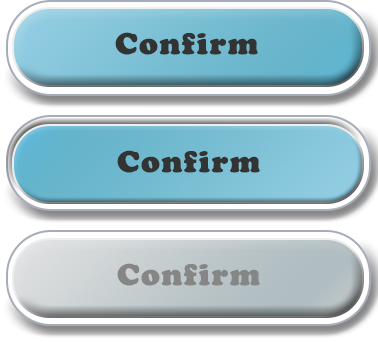
<style>
.page{position:relative;width:378px;height:344px}
.page>*{position:absolute;margin:0}
.t1{font:31.2px "CooperBlack";letter-spacing:0.05em;color:#333333}
.t2{font:31.2px "CooperBlack";letter-spacing:0.05em;color:#878686}
</style>
<div class="page">
<p class="t1" style="left:115px;top:32px;width:143px;height:23px">Confirm</p>
<p class="t1" style="left:117px;top:150px;width:143px;height:23px">Confirm</p>
<p class="t2" style="left:117px;top:263px;width:143px;height:23px">Confirm</p>
</div>
